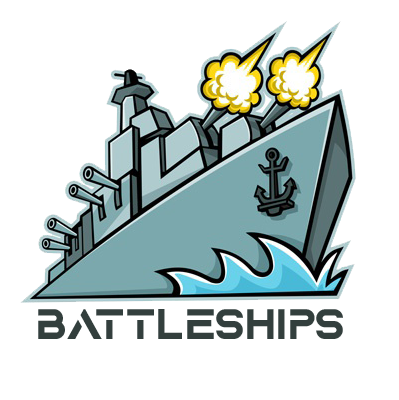
<style>
.page{position:relative;width:399px;height:400px;background:#ffffff}
.page>*{position:absolute;margin:0}
.t1{font:45px "AquireBold";color:#333f3d}
</style>
<div class="page">
<p class="t1" style="left:38px;top:309px;width:305px;height:30px">BattleShips</p>
</div>
